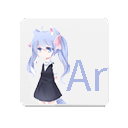
<style>
.page{position:relative;width:128px;height:128px;background:#ffffff}
.page>*{position:absolute;margin:0}
.t1{font:42px "TaipeiSansTCBeta-Regular";color:#aeb8e4}
</style>
<div class="page">
<p class="t1" style="left:66px;top:60px;width:42px;height:31px">Ar</p>
</div>
